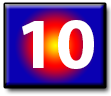
<style>
.page{position:relative;width:111px;height:96px;background:#ffffff}
.page>*{position:absolute;margin:0}
.t1{font:72px "MyriadPro-Bold";color:#ffffff}
</style>
<div class="page">
<p class="t1" style="left:22px;top:20px;width:72px;height:49px">10</p>
</div>
